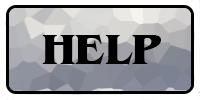
<style>
.page{position:relative;width:200px;height:100px}
.page>*{position:absolute;margin:0}
.t1{font:44.4px "AGBenguiatCyrBoldBold";color:#000000}
</style>
<div class="page">
<p class="t1" style="left:42px;top:34px;width:119px;height:31px">HELP</p>
</div>
